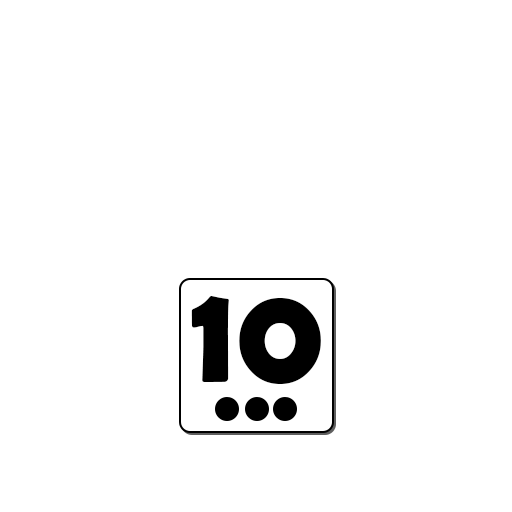
<style>
.page{position:relative;width:512px;height:512px;background:#ffffff}
.page>*{position:absolute;margin:0}
.t1{font:140px "BerlinSansFBDemi-Bold";color:#000000}
</style>
<div class="page">
<p class="t1" style="left:191px;top:296px;width:130px;height:88px">10</p>
</div>
